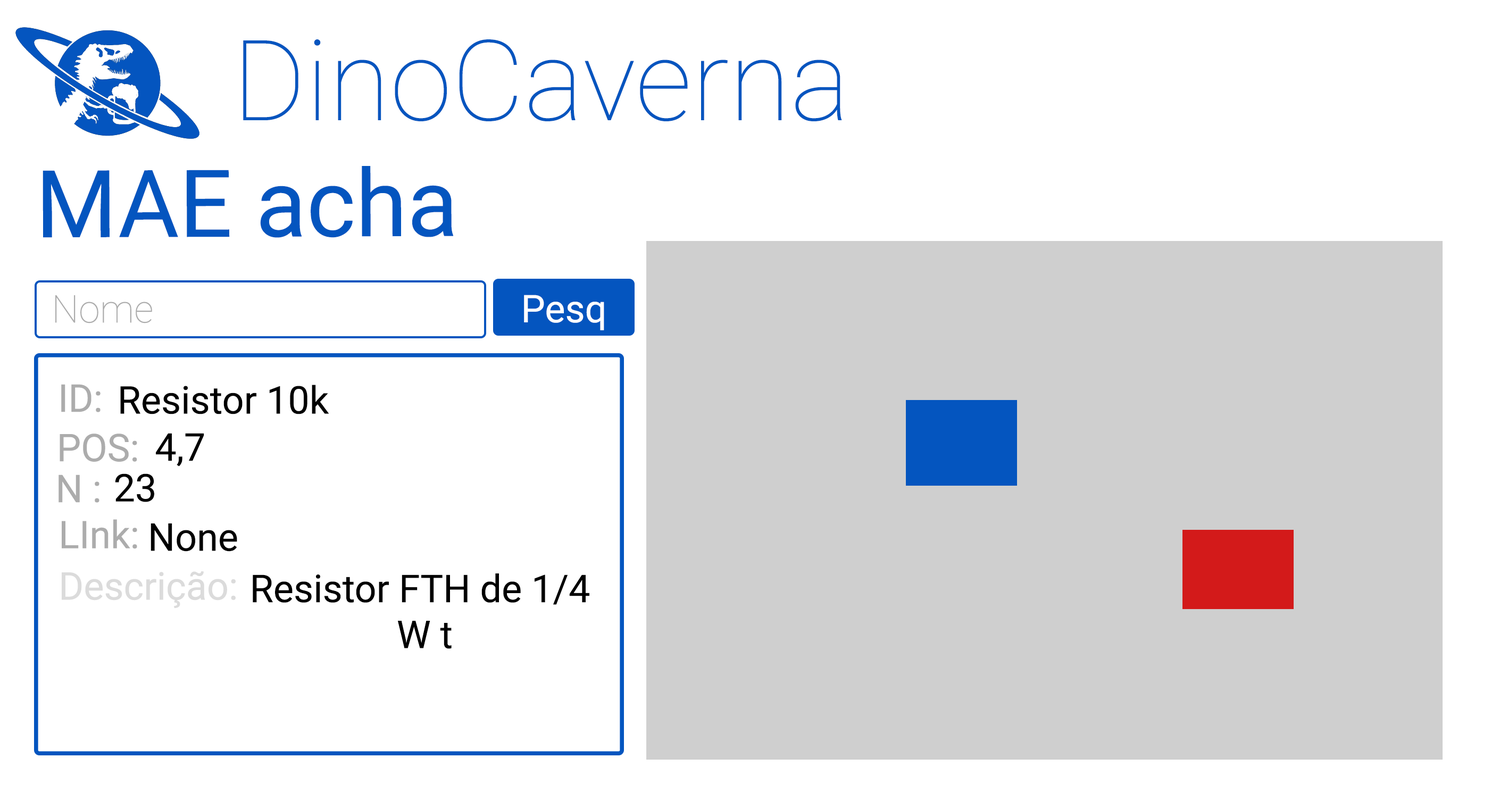
<style>
.page{position:relative;width:1508px;height:791px;background:#ffffff}
.page>*{position:absolute;margin:0}
.t1{font:112px "Roboto-Thin";color:#0455bf}
.t2{font:93.7px "Roboto-Regular";color:#0455bf}
.t3{font:38.3px "Roboto-Thin";color:#acacac}
.t4{font:38.3px "Roboto-Regular";color:#ffffff}
.t5{font:38.3px "Roboto-Regular";color:#acacac}
.t6{font:38.3px "Roboto-Regular";color:#000000}
.t7{font:38.3px "Roboto-Regular";color:#dbdbdb}
</style>
<div class="page">
<p class="t1" style="left:243px;top:39px;width:599px;height:82px">DinoCaverna</p>
<p class="t2" style="left:43px;top:166px;width:410px;height:72px">MAE acha</p>
<p class="t3" style="left:55px;top:295px;width:97px;height:28px">Nome</p>
<p class="t4" style="left:524px;top:295px;width:80px;height:35px">Pesq</p>
<p class="t5" style="left:61px;top:384px;width:40px;height:28px">ID:</p>
<p class="t6" style="left:120px;top:385px;width:209px;height:29px">Resistor 10k</p>
<p class="t5" style="left:60px;top:433px;width:77px;height:29px">POS:</p>
<p class="t6" style="left:156px;top:433px;width:48px;height:33px">4,7</p>
<p class="t6" style="left:115px;top:473px;width:39px;height:29px">23</p>
<p class="t5" style="left:59px;top:474px;width:40px;height:29px">N :</p>
<p class="t5" style="left:62px;top:519px;width:75px;height:30px">LInk:</p>
<p class="t6" style="left:151px;top:523px;width:86px;height:29px">None</p>
<p class="t7" style="left:62px;top:571px;width:174px;height:37px">Descrição:</p>
<p class="t6" style="left:253px;top:573px;width:336px;height:76px;text-align:center">Resistor FTH de 1/4 <br>W t</p>
</div>
